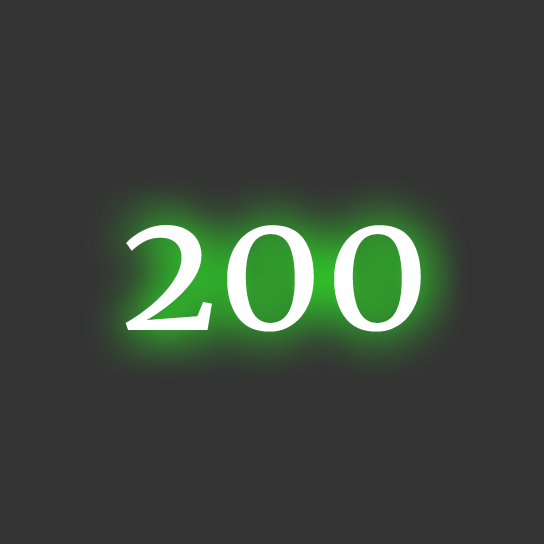
<style>
.page{position:relative;width:544px;height:544px;background:#333333}
.page>*{position:absolute;margin:0}
.t1{font:165.9px "Merriweather-Regular";color:#ffffff}
</style>
<div class="page">
<p class="t1" style="left:125px;top:225px;width:296px;height:107px">200</p>
</div>
